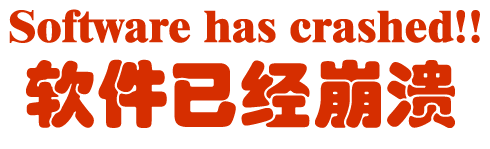
<style>
.page{position:relative;width:490px;height:149px;background:#ffffff}
.page>*{position:absolute;margin:0}
.t1{font:46px "Dutch801BT-ExtraBold";color:#d62e00}
.t2{font:72px "STHupo";color:#d62e00}
</style>
<div class="page">
<p class="t1" style="left:9px;top:9px;width:471px;height:34px">Software has crashed!!</p>
<p class="t2" style="left:26px;top:59px;width:429px;height:69px">软件已经崩溃</p>
</div>
